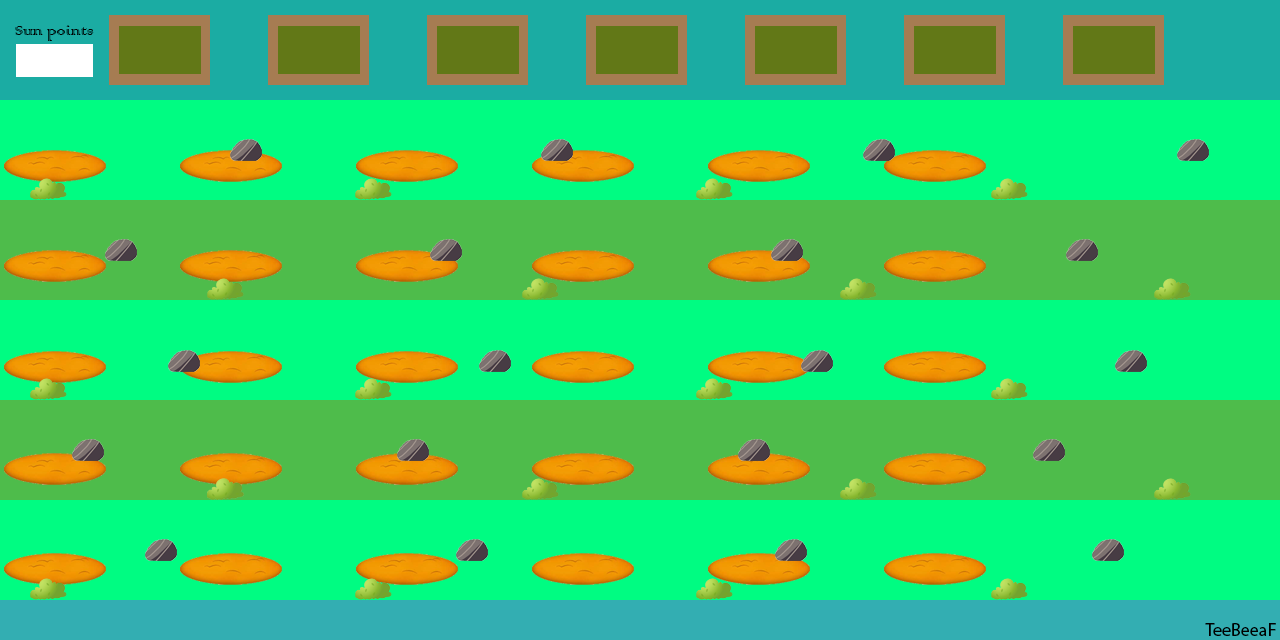
<style>
.page{position:relative;width:1280px;height:640px;background:#00fc82}
.page>*{position:absolute;margin:0}
.t1{font:18px "ColonnaMT";color:#000000}
.t2{font:18px "MyriadPro-Regular";color:#000000}
</style>
<div class="page">
<p class="t1" style="left:15px;top:25px;width:79px;height:16px">Sun points</p>
<p class="t2" style="left:1205px;top:623px;width:71px;height:13px">TeeBeeaF</p>
</div>
